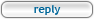
<style>
.page{position:relative;width:94px;height:19px}
.page>*{position:absolute;margin:0}
.t1{font:11px "TrebuchetMS-Bold";color:#006699}
</style>
<div class="page">
<p class="t1" style="left:34px;top:5px;width:27px;height:10px">reply</p>
</div>
